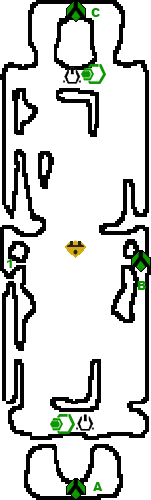
<style>
.page{position:relative;width:151px;height:500px;background:#ffffff}
.page>*{position:absolute;margin:0}
.t1{font:12px "Arial-Black";color:#0c9801}
</style>
<div class="page">
<p class="t1" style="left:91px;top:8px;width:9px;height:9px">C</p>
<p class="t1" style="left:7px;top:259px;width:5px;height:9px">1</p>
<p class="t1" style="left:137px;top:281px;width:9px;height:9px">B</p>
<p class="t1" style="left:93px;top:482px;width:10px;height:9px">A</p>
</div>
